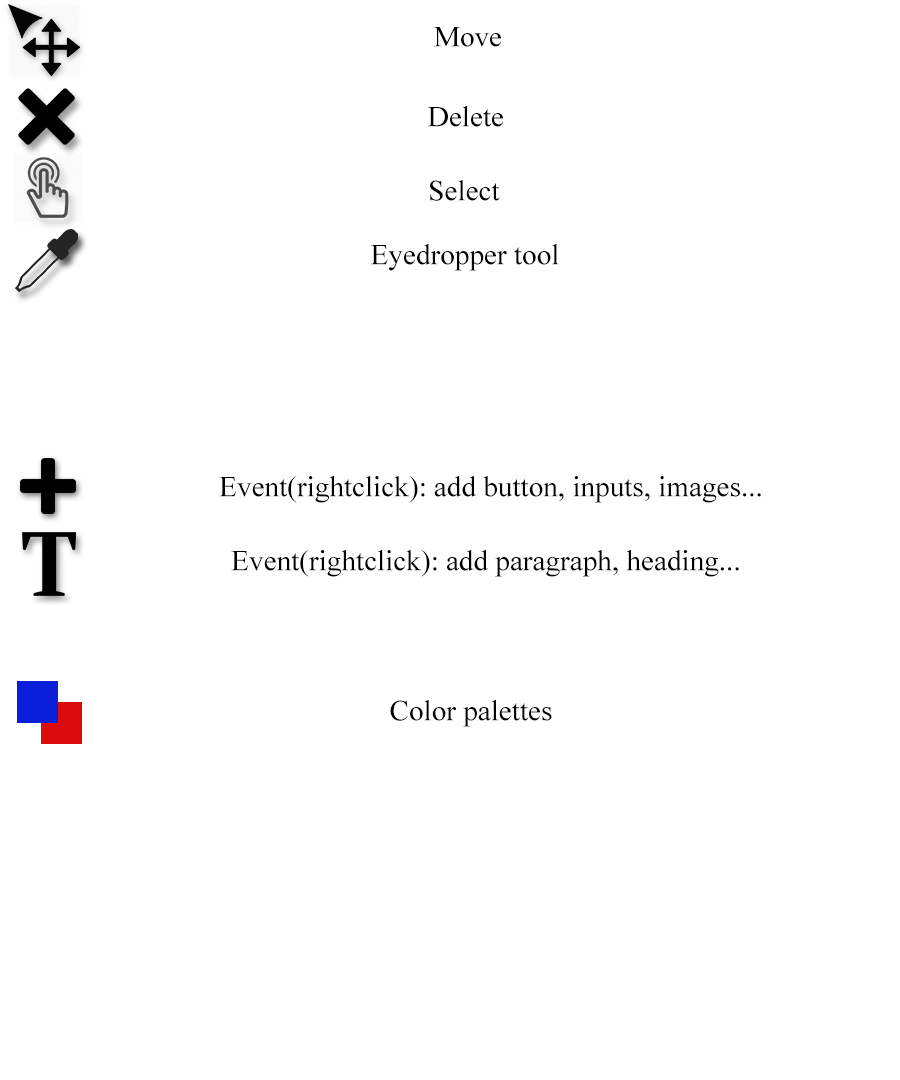
<style>
.page{position:relative;width:900px;height:1080px;background:#ffffff}
.page>*{position:absolute;margin:0}
.t1{font:29.2px "TimesNewRomanPSMT";color:#000000}
</style>
<div class="page">
<p class="t1" style="left:434px;top:27px;width:67px;height:20px">Move</p>
<p class="t1" style="left:428px;top:106px;width:75px;height:21px">Delete</p>
<p class="t1" style="left:430px;top:180px;width:70px;height:21px">Select</p>
<p class="t1" style="left:371px;top:244px;width:188px;height:27px">Eyedropper tool</p>
<p class="t1" style="left:219px;top:476px;width:542px;height:27px">Event(rightclick): add button, inputs, images...</p>
<p class="t1" style="left:231px;top:550px;width:508px;height:27px">Event(rightclick): add paragraph, heading...</p>
<p class="t1" style="left:390px;top:700px;width:162px;height:27px">Color palettes</p>
</div>
